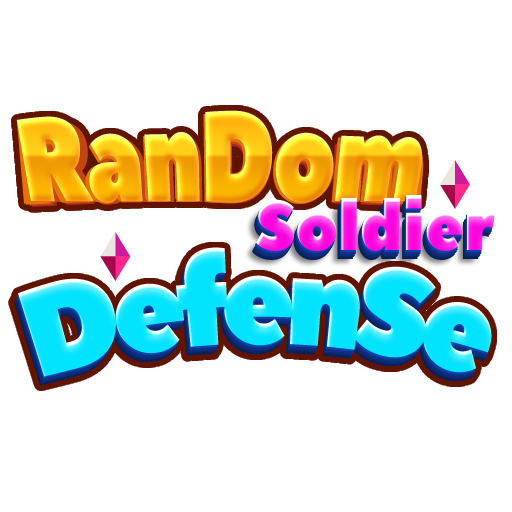
<style>
.page{position:relative;width:512px;height:512px;background:#ffffff}
.page>*{position:absolute;margin:0}
.t1{font:115.2px "PeaceSans";letter-spacing:-0.025em;scale:0.83 1}
.t2{font:112.7px "PeaceSans";letter-spacing:-0.025em;scale:0.83 1}
.t3{font:113.9px "PeaceSans";letter-spacing:-0.025em;scale:0.83 1}
.t4{font:111.6px "PeaceSans";letter-spacing:-0.025em;scale:0.83 1}
.t5{font:109.4px "PeaceSans";letter-spacing:-0.025em;scale:0.83 1}
.t6{font:108.3px "PeaceSans";letter-spacing:-0.025em;scale:0.83 1}
.t7{font:107.2px "PeaceSans";letter-spacing:-0.025em;scale:0.83 1}
.t8{font:110.5px "PeaceSans";letter-spacing:-0.025em;scale:0.83 1}
.t9{font:70.4px "PeaceSans";scale:0.91 1}
.t10{font:124.6px "PeaceSans";letter-spacing:-0.075em;color:#02e3fd;scale:0.77 1}
</style>
<div class="page">
<p class="t1" style="left:16px;top:110px;width:407px;height:93px">RanDom</p>
<p class="t2" style="left:17px;top:113px;width:407px;height:91px">RanDom</p>
<p class="t3" style="left:17px;top:112px;width:401px;height:92px">RanDom</p>
<p class="t4" style="left:19px;top:115px;width:403px;height:90px">RanDom</p>
<p class="t5" style="left:23px;top:118px;width:395px;height:88px">RanDom</p>
<p class="t6" style="left:25px;top:120px;width:391px;height:87px">RanDom</p>
<p class="t7" style="left:27px;top:121px;width:387px;height:86px">RanDom</p>
<p class="t8" style="left:27px;top:115px;width:389px;height:89px">RanDom</p>
<p class="t9" style="left:256px;top:195px;width:239px;height:56px">Soldier</p>
<p class="t10" style="left:18px;top:247px;width:475px;height:130px">DefenSe</p>
</div>
